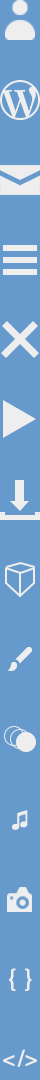
<style>
.page{position:relative;width:40px;height:1080px;background:#6699cc}
.page>*{position:absolute;margin:0}
.t1{font:24px "ArialMT";color:#eeeeee;font-weight:bold}
.t2{font:24px "Helvetica";color:#eeeeee;font-weight:bold}
.t3{font:22px "Helvetica";color:#eeeeee;font-weight:bold}
.t4{font:22px "Helvetica";letter-spacing:0.1em;color:#eeeeee;font-weight:bold}
</style>
<div class="page">
<p class="t1" style="left:12px;top:810px;width:16px;height:20px">♫</p>
<p class="t2" style="left:9px;top:968px;width:23px;height:23px">{ }</p>
<p class="t3" style="left:3px;top:1049px;width:34px;height:18px"><span class="t4">&lt;</span>/&gt;</p>
</div>
